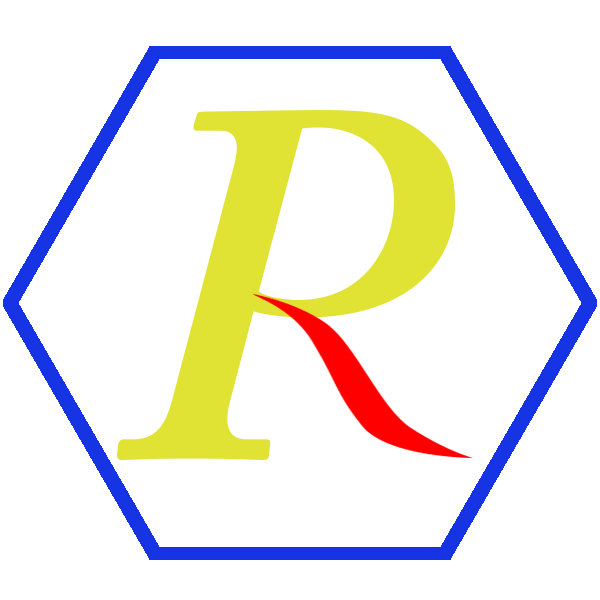
<style>
.page{position:relative;width:600px;height:600px;background:#ffffff}
.page>*{position:absolute;margin:0}
.t1{font:516.7px "ACaslonPro-SemiboldItalic";color:#e0e234}
</style>
<div class="page">
<p class="t1" style="left:117px;top:110px;width:338px;height:351px">P</p>
</div>
